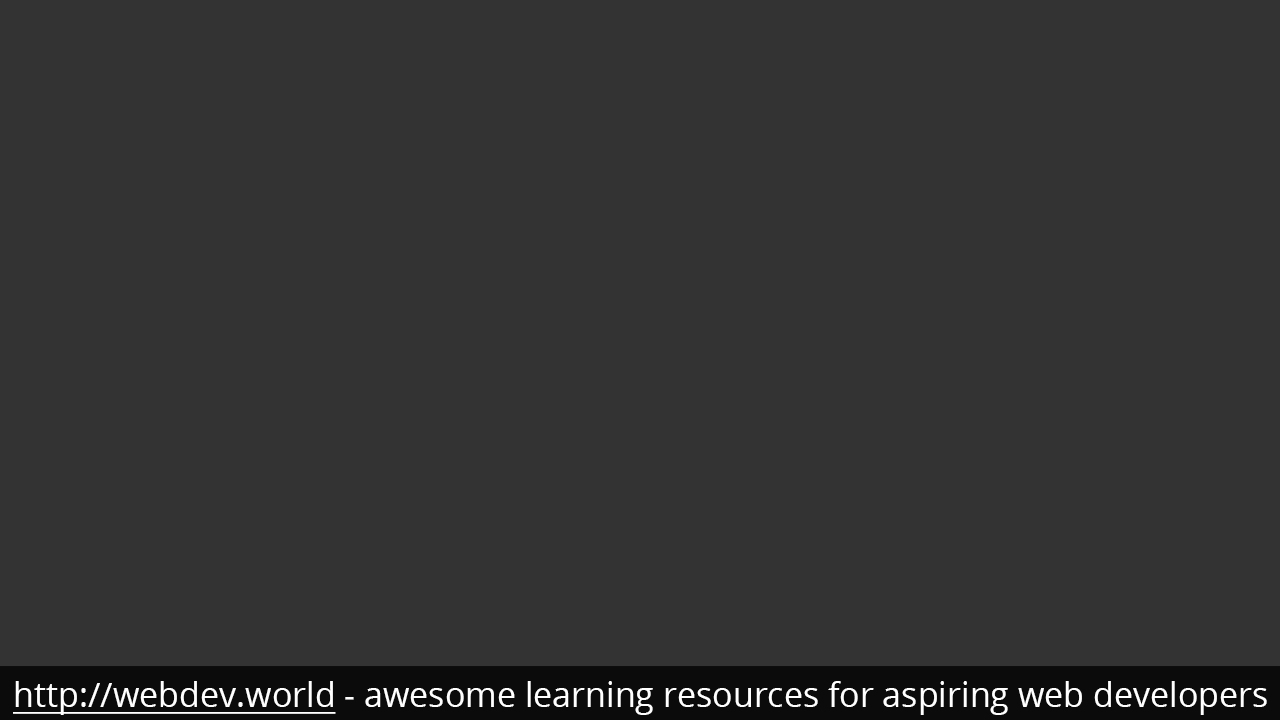
<style>
.page{position:relative;width:1280px;height:720px;background:#333333}
.page>*{position:absolute;margin:0}
.t1{font:34px "OpenSans";color:#ffffff}
.t2{font:34px "OpenSans";color:#ffffff;text-decoration:underline}
</style>
<div class="page">
<p class="t1" style="left:13px;top:681px;width:1254px;height:34px"><span class="t2">http://webdev.world</span> - awesome learning resources for aspiring web developers</p>
</div>
